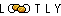
<style>
.page{position:relative;width:61px;height:16px;background:#ffffff}
.page>*{position:absolute;margin:0}
.t1{font:12px "MyriadPro-Regular";letter-spacing:0.4em;color:#000000}
</style>
<div class="page">
<p class="t1" style="left:0px;top:4px;width:61px;height:9px">LOOTLY</p>
</div>
